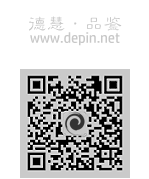
<style>
.page{position:relative;width:149px;height:179px;background:#ffffff}
.page>*{position:absolute;margin:0}
.t1{font:18.9px "HYf2gj";color:#c8c8c8}
.t2{font:14.4px "HPSimplified-Regular";color:#c8c8c8}
</style>
<div class="page">
<p class="t1" style="left:29px;top:16px;width:93px;height:15px">德慧·品鉴</p>
<p class="t2" style="left:30px;top:32px;width:90px;height:14px">www.depin.net</p>
</div>
